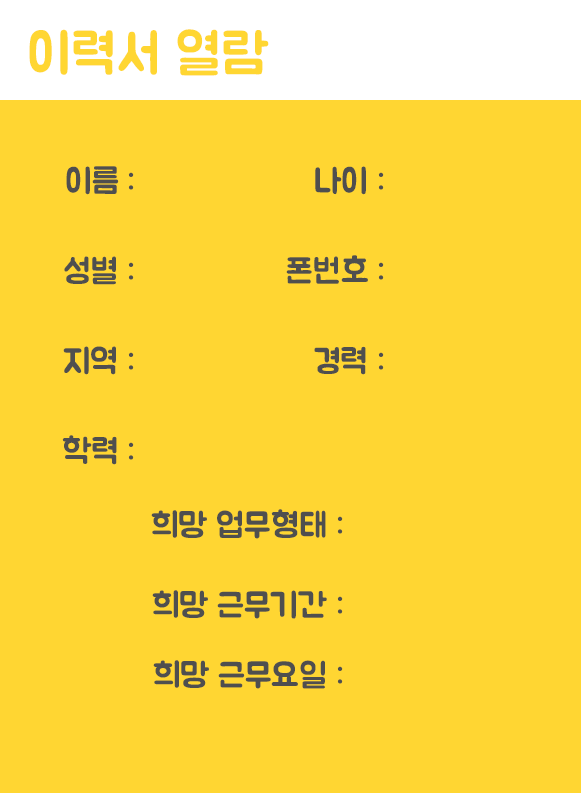
<style>
.page{position:relative;width:581px;height:793px;background:#ffd632}
.page>*{position:absolute;margin:0}
.t1{font:55.6px "BMJUA";color:#ffd632}
.t2{font:34px "BMJUA";color:#4f4f4f}
</style>
<div class="page">
<p class="t1" style="left:29px;top:29px;width:240px;height:47px">이력서 열람</p>
<p class="t2" style="left:66px;top:166px;width:68px;height:29px">이름 :</p>
<p class="t2" style="left:315px;top:166px;width:69px;height:29px">나이 :</p>
<p class="t2" style="left:64px;top:256px;width:70px;height:29px">성별 :</p>
<p class="t2" style="left:286px;top:255px;width:98px;height:29px">폰번호 :</p>
<p class="t2" style="left:63px;top:346px;width:71px;height:29px">지역 :</p>
<p class="t2" style="left:314px;top:346px;width:70px;height:29px">경력 :</p>
<p class="t2" style="left:62px;top:435px;width:72px;height:30px">학력 :</p>
<p class="t2" style="left:151px;top:509px;width:192px;height:30px">희망 업무형태 :</p>
<p class="t2" style="left:152px;top:590px;width:191px;height:29px">희망 근무기간 :</p>
<p class="t2" style="left:153px;top:660px;width:190px;height:29px">희망 근무요일 :</p>
</div>
